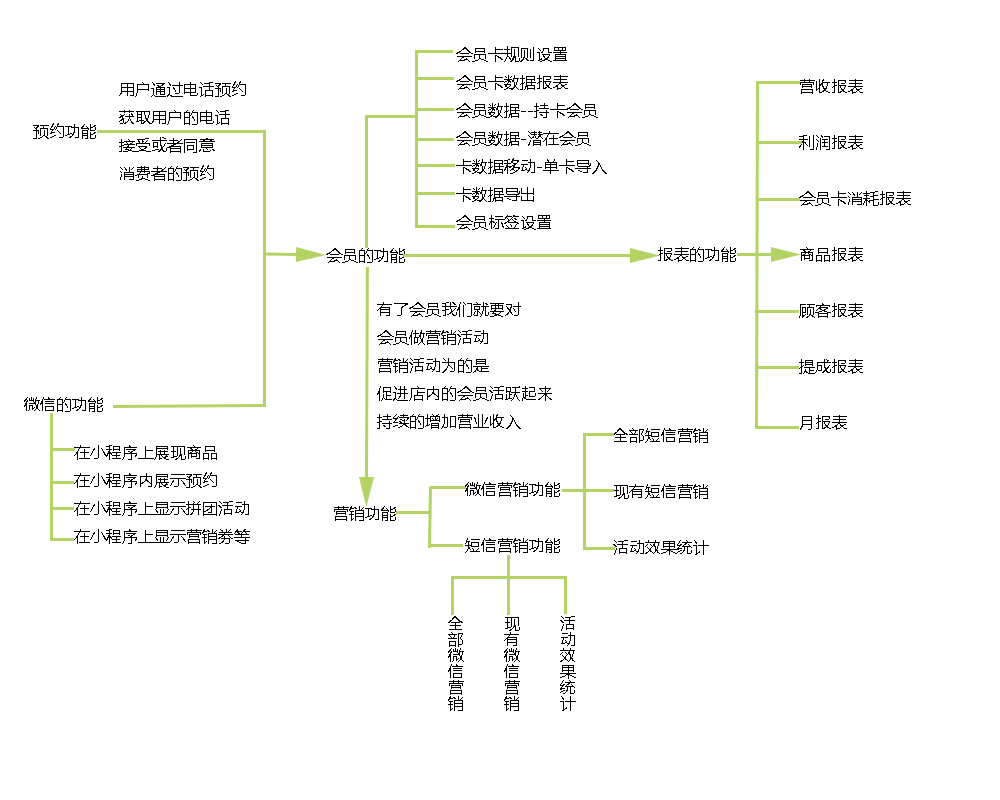
<style>
.page{position:relative;width:1000px;height:800px;background:#ffffff}
.page>*{position:absolute;margin:0}
.t1{font:16px "MicrosoftYaHei";color:#000000}
</style>
<div class="page">
<p class="t1" style="left:456px;top:46px;width:151px;height:184px">会员卡规则设置<br>会员卡数据报表<br>会员数据--持卡会员<br>会员数据-潜在会员<br>卡数据移动-单卡导入<br>卡数据导出<br>会员标签设置</p>
<p class="t1" style="left:119px;top:81px;width:127px;height:100px">用户通过电话预约<br>获取用户的电话<br>接受或者同意<br>消费者的预约</p>
<p class="t1" style="left:799px;top:79px;width:112px;height:351px">营收报表<br><br>利润报表<br><br>会员卡消耗报表<br><br>商品报表<br><br>顾客报表<br><br>提成报表<br><br>月报表</p>
<p class="t1" style="left:33px;top:123px;width:63px;height:16px">预约功能</p>
<p class="t1" style="left:326px;top:248px;width:79px;height:15px">会员的功能</p>
<p class="t1" style="left:658px;top:247px;width:78px;height:15px">报表的功能</p>
<p class="t1" style="left:377px;top:302px;width:175px;height:127px">有了会员我们就要对<br>会员做营销活动<br>营销活动为的是<br>促进店内的会员活跃起来<br>持续的增加营业收入</p>
<p class="t1" style="left:24px;top:397px;width:79px;height:15px">微信的功能</p>
<p class="t1" style="left:613px;top:428px;width:96px;height:127px">全部短信营销<br><br>现有短信营销<br><br>活动效果统计</p>
<p class="t1" style="left:74px;top:445px;width:176px;height:99px">在小程序上展现商品<br>在小程序内展示预约<br>在小程序上显示拼团活动<br>在小程序上显示营销劵等</p>
<p class="t1" style="left:465px;top:482px;width:95px;height:71px">微信营销功能<br><br>短信营销功能</p>
<p class="t1" style="left:334px;top:506px;width:62px;height:15px">营销功能</p>
<p class="t1" style="left:448px;top:616px;width:128px;height:95px">活动效果统计<br><br>现有微信营销<br><br>全部微信营销</p>
</div>
